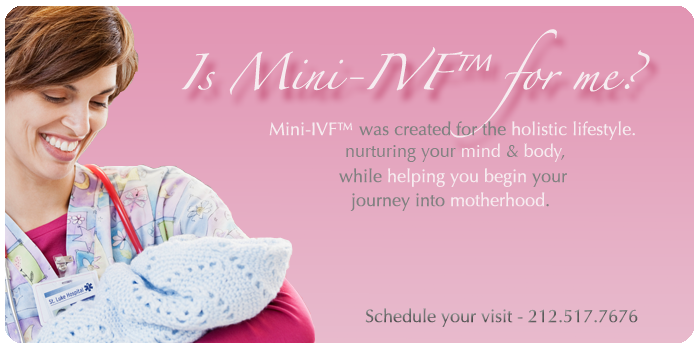
<style>
.page{position:relative;width:700px;height:350px}
.page>*{position:absolute;margin:0}
.t1{font:32px "Zapfino";color:#f6ecf0}
.t2{font:18px "Optima-Regular";color:#818181}
.t3{font:18px "Optima-Regular";color:#f6ecf0}
.t4{font:18px "Optima-Regular";color:#6d6d6d}
</style>
<div class="page">
<p class="t1" style="left:181px;top:29px;width:469px;height:109px">Is Mini-IVF™ for me?</p>
<p class="t2" style="left:269px;top:121px;width:366px;height:19px"><span class="t3">Mini-IVF™ </span>was created for the<span class="t3"> holistic lifestyle.</span></p>
<p class="t2" style="left:346px;top:143px;width:219px;height:19px">nurturing your <span class="t3">mind</span> &amp; <span class="t3">body</span>,</p>
<p class="t3" style="left:339px;top:168px;width:228px;height:19px"><span class="t2">while </span>helping you begin<span class="t2"> your</span></p>
<p class="t2" style="left:350px;top:192px;width:199px;height:19px">journey into <span class="t3">motherhood</span>.</p>
<p class="t4" style="left:365px;top:308px;width:273px;height:19px">Schedule your visit - 212.517.7676</p>
</div>
